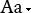
<style>
.page{position:relative;width:31px;height:13px;background:#ffffff}
.page>*{position:absolute;margin:0}
.t1{font:18px "IowanOldStyle-Roman";color:#000000}
</style>
<div class="page">
<p class="t1" style="left:0px;top:0px;width:23px;height:13px">Aa</p>
</div>
